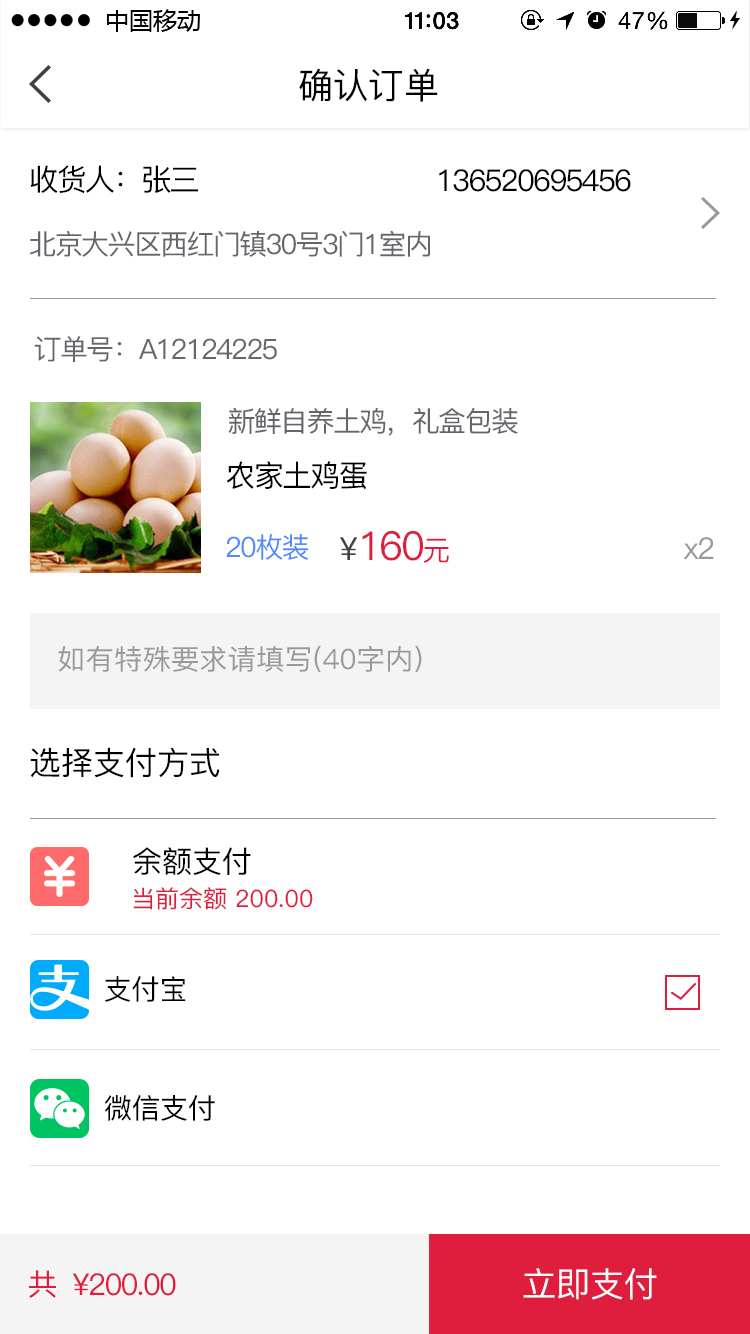
<style>
.page{position:relative;width:750px;height:1334px;background:#ffffff}
.page>*{position:absolute;margin:0}
.t1{font:35.7px "PingFang-SC-Medium";color:#000000}
.t2{font:28px/40px "PingFang-SC-Medium";letter-spacing:-0.06em;color:#63666b}
.t3{font:30px/66px "PingFang-SC-Medium";letter-spacing:-0.06em;color:#000000}
.t4{font:30px "PingFang-SC-Medium";letter-spacing:-0.06em;color:#000000}
.t5{font:28px "PingFang-SC-Medium";letter-spacing:-0.06em;color:#63666b}
.t6{font:28px "PingFang-SC-Medium";letter-spacing:-0.06em;color:#5388ff}
.t7{font:40px "PingFang-SC-Medium";letter-spacing:-0.06em;color:#df1e3e}
.t8{font:32px "PingFang-SC-Medium";color:#414141}
.t9{font:28px "PingFang-SC-Medium";letter-spacing:-0.06em;color:#df1e3e}
.t10{font:30px "PingFang-SC-Medium";letter-spacing:-0.06em;color:#999999}
.t11{font:28px "PingFang-SC-Medium";color:#999999}
.t12{font:32px "PingFang-SC-Medium";color:#000000}
.t13{font:30px "PingFang-SC-Medium";color:#000000}
.t14{font:24px "PingFang-SC-Medium";color:#df1e3e}
.t15{font:28px "PingFang-SC-Medium";color:#000000}
.t16{font:30px "PingFang-SC-Medium";letter-spacing:-0.06em;color:#df1e3e}
.t17{font:34px "PingFang-SC-Medium";color:#ffffff}
</style>
<div class="page">
<p class="t1" style="left:299px;top:68px;width:139px;height:34px">确认订单</p>
<p class="t2" style="left:30px;top:165px;width:400px;height:92px"><span class="t3">收货人：张三<br></span>北京大兴区西红门镇30号3门1室内</p>
<p class="t4" style="left:439px;top:169px;width:192px;height:23px">136520695456</p>
<p class="t5" style="left:34px;top:336px;width:243px;height:26px">订单号：A12124225</p>
<p class="t5" style="left:228px;top:407px;width:290px;height:29px">新鲜自养土鸡，礼盒包装</p>
<p class="t4" style="left:227px;top:461px;width:140px;height:29px">农家土鸡蛋</p>
<p class="t6" style="left:226px;top:534px;width:83px;height:26px">20枚装</p>
<p class="t7" style="left:340px;top:531px;width:109px;height:32px"><span class="t8">¥</span>160<span class="t9">元</span></p>
<p class="t10" style="left:683px;top:537px;width:31px;height:22px">x2</p>
<p class="t11" style="left:58px;top:645px;width:364px;height:27px">如有特殊要求请填写(40字内)</p>
<p class="t12" style="left:30px;top:747px;width:190px;height:31px">选择支付方式</p>
<p class="t13" style="left:133px;top:847px;width:118px;height:28px">余额支付</p>
<p class="t14" style="left:133px;top:887px;width:180px;height:23px">当前余额 200.00</p>
<p class="t15" style="left:105px;top:976px;width:81px;height:26px">支付宝</p>
<p class="t15" style="left:105px;top:1095px;width:110px;height:26px">微信支付</p>
<p class="t16" style="left:29px;top:1270px;width:147px;height:28px">共  ¥200.00</p>
<p class="t17" style="left:523px;top:1268px;width:134px;height:32px">立即支付</p>
</div>
